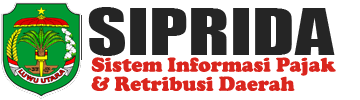
<style>
.page{position:relative;width:360px;height:100px;background:#ffffff}
.page>*{position:absolute;margin:0}
.t1{font:59.8px "Impact";color:#252525;scale:1.3 1}
.t2{font:20.7px/19.1px "CooperBlack";color:#da251d}
</style>
<div class="page">
<p class="t1" style="left:88px;top:7px;width:247px;height:49px">SIPRIDA</p>
<p class="t2" style="left:91px;top:57px;width:245px;height:35px">Sistem Informasi Pajak<br>&amp; Retribusi Daerah</p>
</div>
